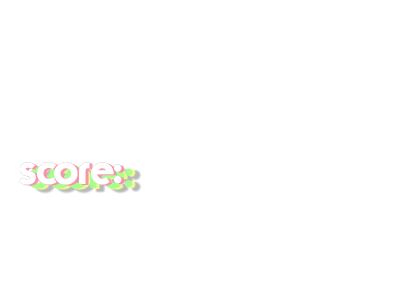
<style>
.page{position:relative;width:400px;height:300px;background:#ffffff}
.page>*{position:absolute;margin:0}
.t1{font:41.7px "TypoGraphica";color:#c7c7c7}
</style>
<div class="page">
<p class="t1" style="left:19px;top:162px;width:103px;height:23px">score:</p>
<p class="t1" style="left:19px;top:162px;width:103px;height:23px">score:</p>
<p class="t1" style="left:19px;top:162px;width:103px;height:23px">score:</p>
<p class="t1" style="left:19px;top:162px;width:103px;height:23px">score:</p>
</div>
